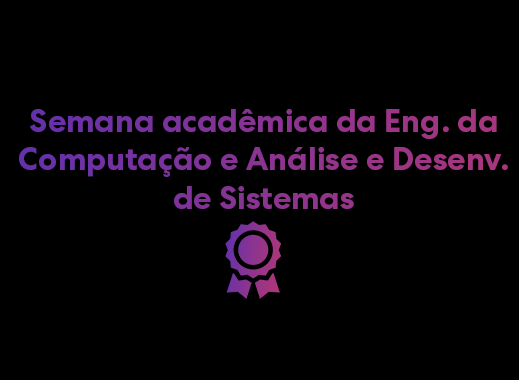
<style>
.page{position:relative;width:519px;height:380px;background:#000000}
.page>*{position:absolute;margin:0}
.t1{font:32px "CentraNo2-Bold"}
</style>
<div class="page">
<p class="t1" style="left:19px;top:109px;width:489px;height:100px;text-align:center">Semana acadêmica da Eng. da<br> Computação e Análise e Desenv.<br> de Sistemas</p>
</div>
